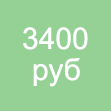
<style>
.page{position:relative;width:111px;height:111px;background:#95d195}
.page>*{position:absolute;margin:0}
.t1{font:30px "ArialMT";color:#ffffff}
</style>
<div class="page">
<p class="t1" style="left:23px;top:27px;width:65px;height:23px">3400</p>
<p class="t1" style="left:33px;top:58px;width:47px;height:29px">руб</p>
</div>
